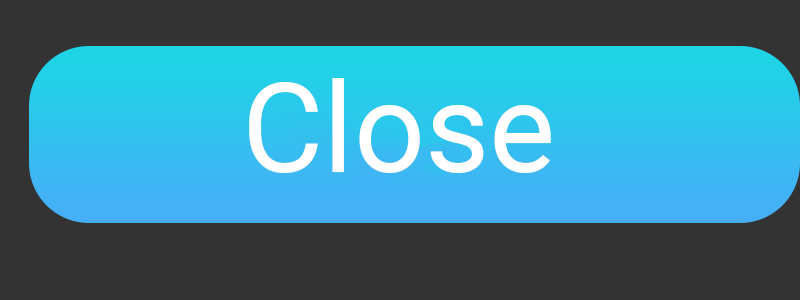
<style>
.page{position:relative;width:800px;height:300px;background:#333333}
.page>*{position:absolute;margin:0}
.t1{font:125px "Roboto-Regular";color:#ffffff}
</style>
<div class="page">
<p class="t1" style="left:249px;top:78px;width:302px;height:95px">Close</p>
</div>
